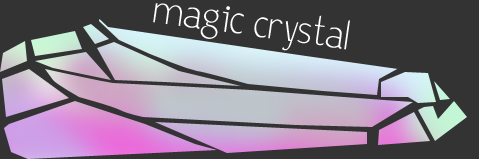
<style>
.page{position:relative;width:479px;height:159px;background:#333333}
.page>*{position:absolute;margin:0}
.t1{font:40px "Birdcherry-Regular";color:#ffffff}
</style>
<div class="page">
<p class="t1" style="left:153px;top:3px;width:197px;height:48px;rotate:8deg">magic crystal</p>
</div>
